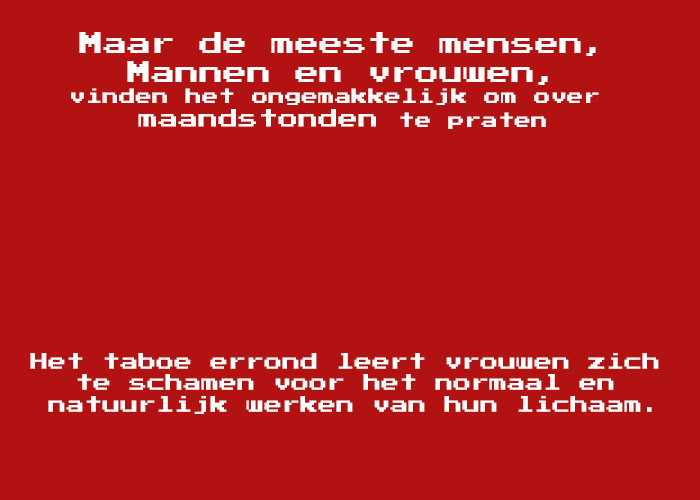
<style>
.page{position:relative;width:700px;height:500px;background:#b21212}
.page>*{position:absolute;margin:0}
.t1{font:24px "PressStart2P";color:#ffffff}
.t2{font:16.6px "PressStart2P";color:#ffffff}
.t3{font:20px "PressStart2P";color:#ffffff}
.t4{font:18px "PressStart2P";color:#ffffff}
</style>
<div class="page">
<p class="t1" style="left:71px;top:32px;width:528px;height:97px;text-align:center">Maar de meeste mensen,<br>Mannen en vrouwen,<br><span class="t2">vinden het ongemakkelijk om over <br></span><span class="t3">maandstonden </span><span class="t2">te praten</span></p>
<p class="t4" style="left:30px;top:353px;width:629px;height:61px;text-align:center">Het taboe errond leert vrouwen zich <br>te schamen voor het normaal en <br>natuurlijk werken van hun lichaam.</p>
</div>
